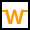
<style>
.page{position:relative;width:30px;height:30px;background:#ffffff}
.page>*{position:absolute;margin:0}
.t1{font:20px "OpenSans-Bold";color:#ff9900}
</style>
<div class="page">
<p class="t1" style="left:5px;top:9px;width:19px;height:15px">W</p>
</div>
